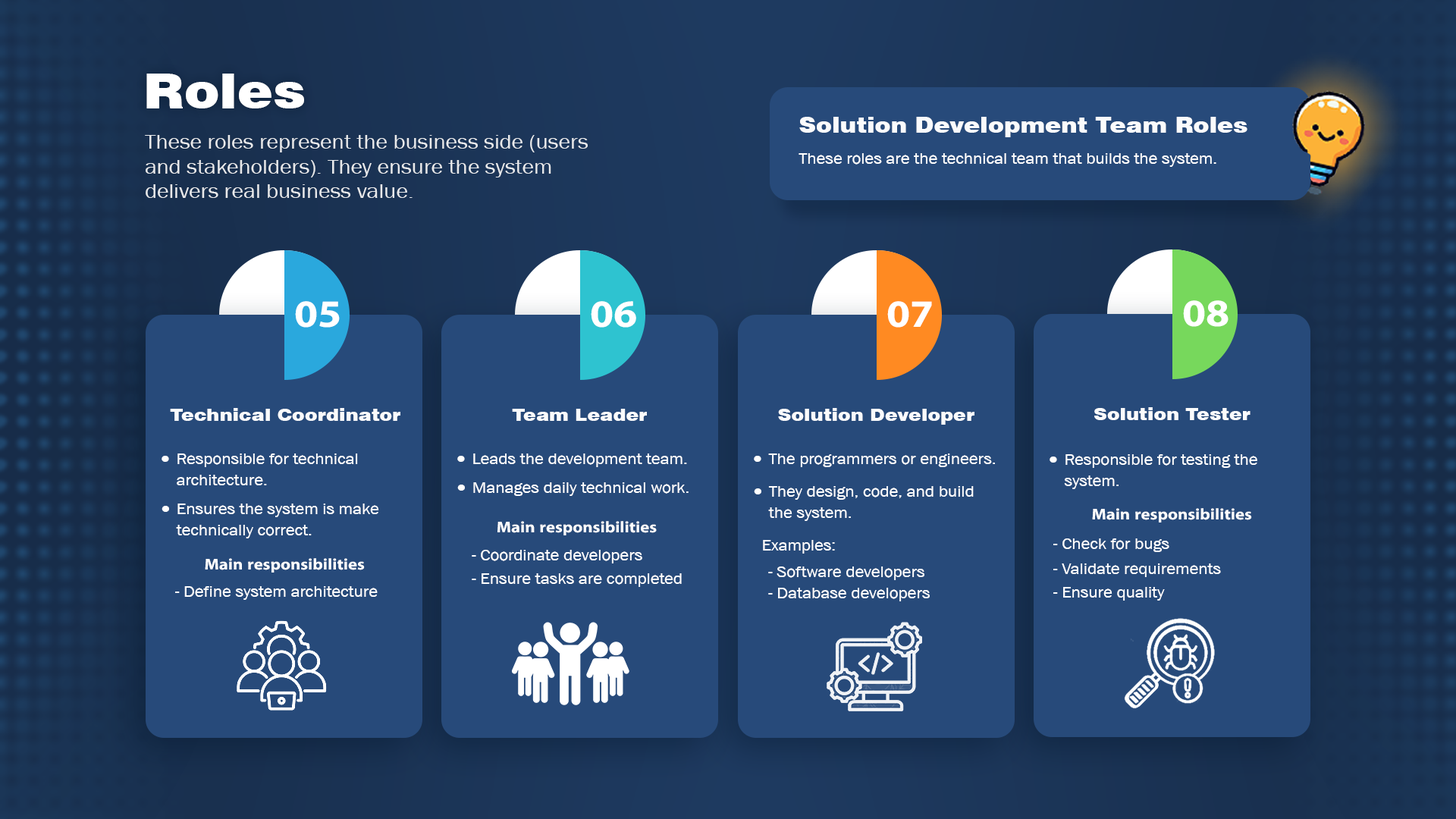
<style>
.page{position:relative;width:1456px;height:819px;background:#274a7a}
.page>*{position:absolute;margin:0}
.t1{font:48.5px "Swiss721BT-Black";color:#ffffff;scale:1.1 1}
.t2{font:21.9px "Swiss721BT-Black";color:#fafbfc;scale:1.1 1}
.t3{font:20.5px "AA-Khmer-AngDaunPov";color:#ffffff;scale:1.1 1}
.t4{font:15.7px "AA-Khmer-AngDaunPov";color:#ffffff;scale:1.1 1}
.t5{font:38.8px "iKampuchea001_O'Chrov";color:#ffffff;scale:1.1 1}
.t6{font:17.3px "Swiss721BT-Black";color:#fafbfc;scale:1.1 1}
.t7{font:15.7px/21.3px "AA-Khmer-AngDaunPov";color:#ffffff;scale:1.1 1}
.t8{font:15.7px "iKampuchea001_O'Chrov";color:#ffffff;scale:1.1 1}
</style>
<div class="page">
<p class="t1" style="left:146px;top:74px;width:158px;height:34px">Roles</p>
<p class="t2" style="left:799px;top:117px;width:448px;height:20px">Solution Development Team Roles</p>
<p class="t3" style="left:145px;top:135px;width:443px;height:63px;opacity:0.86">These roles represent the business side (users <br>and stakeholders). They ensure the system <br>delivers real business value.</p>
<p class="t4" style="left:799px;top:153px;width:417px;height:14px">These roles are the technical team that builds the system.</p>
<p class="t5" style="left:295px;top:301px;width:45px;height:27px">05</p>
<p class="t5" style="left:591px;top:301px;width:45px;height:27px">06</p>
<p class="t5" style="left:887px;top:301px;width:45px;height:27px">07</p>
<p class="t5" style="left:1183px;top:300px;width:45px;height:27px">08</p>
<p class="t6" style="left:170px;top:408px;width:230px;height:13px">Technical Coordinator</p>
<p class="t6" style="left:512px;top:409px;width:135px;height:12px">Team Leader</p>
<p class="t6" style="left:778px;top:408px;width:196px;height:17px">Solution Developer</p>
<p class="t6" style="left:1094px;top:407px;width:156px;height:13px">Solution Tester</p>
<p class="t7" style="left:177px;top:453px;width:181px;height:32px">Responsible for technical <br>architecture.</p>
<p class="t4" style="left:473px;top:453px;width:214px;height:14px">Leads the development team.</p>
<p class="t4" style="left:768px;top:453px;width:227px;height:14px">The programmers or engineers.</p>
<p class="t7" style="left:1064px;top:454px;width:193px;height:35px">Responsible for testing the <br>system.</p>
<p class="t4" style="left:473px;top:482px;width:216px;height:14px">Manages daily technical work.</p>
<p class="t7" style="left:768px;top:486px;width:206px;height:35px">They design, code, and build <br>the system.</p>
<p class="t7" style="left:176px;top:504px;width:203px;height:34px">Ensures the system is make <br>technically correct.</p>
<p class="t8" style="left:1092px;top:508px;width:160px;height:14px">Main responsibilities</p>
<p class="t8" style="left:497px;top:521px;width:160px;height:14px">Main responsibilities</p>
<p class="t4" style="left:763px;top:540px;width:72px;height:14px">Examples:</p>
<p class="t4" style="left:1053px;top:538px;width:116px;height:14px">- Check for bugs</p>
<p class="t4" style="left:472px;top:550px;width:170px;height:13px">- Coordinate developers</p>
<p class="t8" style="left:205px;top:558px;width:160px;height:15px">Main responsibilities</p>
<p class="t7" style="left:768px;top:566px;width:162px;height:35px">- Software developers<br>- Database developers</p>
<p class="t4" style="left:1053px;top:563px;width:168px;height:14px">- Validate requirements</p>
<p class="t4" style="left:472px;top:573px;width:210px;height:14px">- Ensure tasks are completed</p>
<p class="t4" style="left:175px;top:586px;width:203px;height:14px">- Define system architecture</p>
<p class="t4" style="left:1053px;top:587px;width:112px;height:14px">- Ensure quality</p>
</div>
